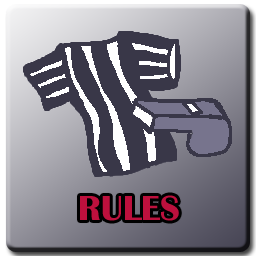
<style>
.page{position:relative;width:256px;height:256px}
.page>*{position:absolute;margin:0}
.t1{font:36px "BritannicBold";color:#bd103d}
</style>
<div class="page">
<p class="t1" style="left:80px;top:195px;width:99px;height:26px">RULES</p>
</div>
